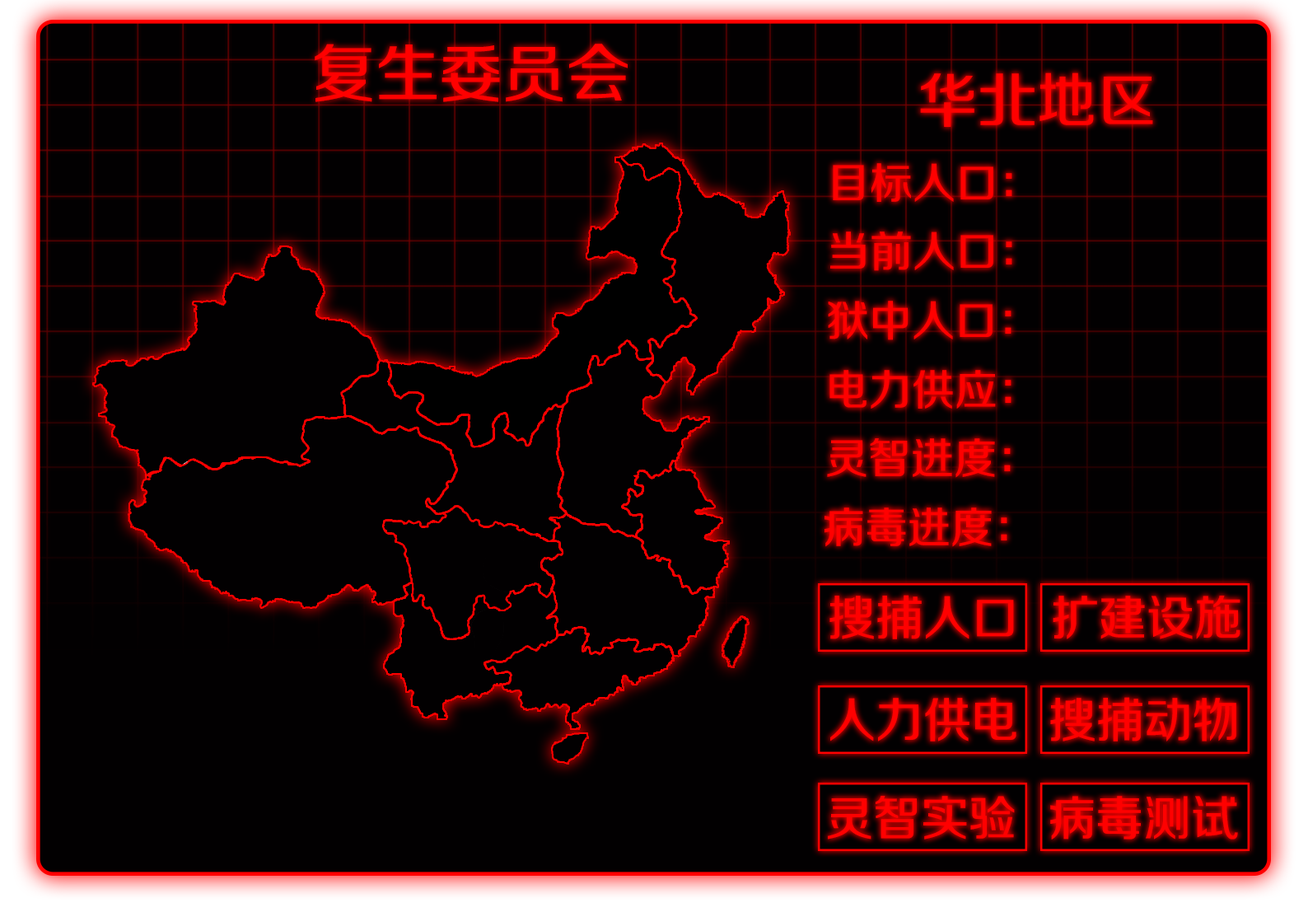
<style>
.page{position:relative;width:1308px;height:912px;background:#020001}
.page>*{position:absolute;margin:0}
.t1{font:63.7px "FZZZHUNHJW--GB1-0";color:#ff0000}
.t2{font:59.6px "FZZZHUNHJW--GB1-0";color:#ff0000}
.t3{font:42.9px "FZZZHUNHJW--GB1-0";color:#ff0000}
.t4{font:47.9px "FZZZHUNHJW--GB1-0";color:#ff0000}
</style>
<div class="page">
<p class="t1" style="left:315px;top:44px;width:313px;height:58px">复生委员会</p>
<p class="t2" style="left:920px;top:72px;width:233px;height:55px">华北地区</p>
<p class="t3" style="left:833px;top:163px;width:179px;height:39px">目标人口：</p>
<p class="t3" style="left:830px;top:231px;width:182px;height:40px">当前人口：</p>
<p class="t3" style="left:828px;top:301px;width:183px;height:39px">狱中人口：</p>
<p class="t3" style="left:829px;top:370px;width:182px;height:39px">电力供应：</p>
<p class="t3" style="left:827px;top:438px;width:184px;height:40px">灵智进度：</p>
<p class="t3" style="left:824px;top:507px;width:183px;height:40px">病毒进度：</p>
<p class="t4" style="left:829px;top:595px;width:185px;height:44px">搜捕人口</p>
<p class="t4" style="left:1053px;top:595px;width:187px;height:44px">扩建设施</p>
<p class="t4" style="left:830px;top:698px;width:186px;height:43px">人力供电</p>
<p class="t4" style="left:1050px;top:697px;width:186px;height:44px">搜捕动物</p>
<p class="t4" style="left:828px;top:796px;width:187px;height:43px">灵智实验</p>
<p class="t4" style="left:1050px;top:796px;width:188px;height:43px">病毒测试</p>
</div>
